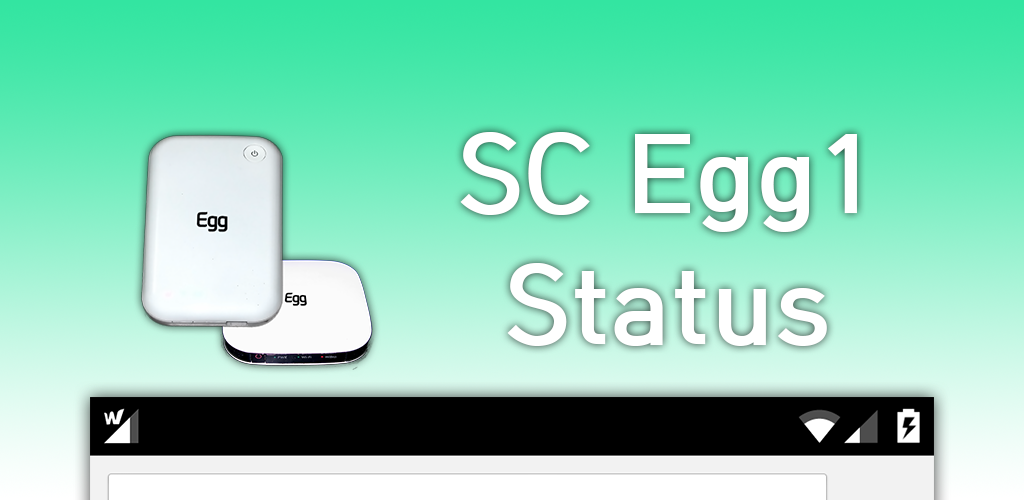
<style>
.page{position:relative;width:1024px;height:500px}
.page>*{position:absolute;margin:0}
.t1{font:109px "HCRDotum-Bold";color:#ffffff}
</style>
<div class="page">
<p class="t1" style="left:460px;top:132px;width:397px;height:214px;text-align:center">SC Egg1<br>Status</p>
</div>
